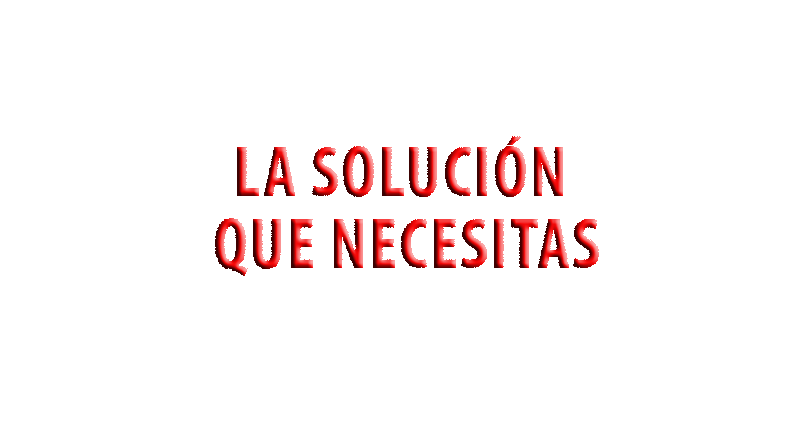
<style>
.page{position:relative;width:800px;height:430px;background:#ffffff}
.page>*{position:absolute;margin:0}
.t1{font:72px/72px "MyriadPro-BoldCond";letter-spacing:0.025em;text-transform:uppercase}
</style>
<div class="page">
<p class="t1" style="left:215px;top:136px;width:384px;height:140px;text-align:center">La Solución<br> que necesitas</p>
</div>
